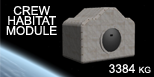
<style>
.page{position:relative;width:154px;height:77px;background:#000000}
.page>*{position:absolute;margin:0}
.t1{font:12px/10px "ArialMT";color:#fcfcfc;font-variant:small-caps}
.t2{font:12px "ArialMT";color:#fcfcfc;font-variant:small-caps}
</style>
<div class="page">
<p class="t1" style="left:6px;top:6px;width:51px;height:29px;text-align:center">CREW<br>HABITAT<br>MODULE</p>
<p class="t2" style="left:109px;top:64px;width:42px;height:9px">3384 kg</p>
</div>
